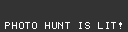
<style>
.page{position:relative;width:128px;height:32px;background:#333333}
.page>*{position:absolute;margin:0}
.t1{font:11.2px "Terminal";letter-spacing:-0.075em;color:#ffffff}
</style>
<div class="page">
<p class="t1" style="left:5px;top:22px;width:117px;height:7px">PHOTO HUNT IS LIT!</p>
</div>
